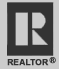
<style>
.page{position:relative;width:59px;height:69px;background:#cccccc}
.page>*{position:absolute;margin:0}
.t1{font:8.3px "Arial-BoldMT";color:#333333;font-weight:bold}
</style>
<div class="page">
<p class="t1" style="left:7px;top:59px;width:42px;height:7px">REALTOR</p>
<p class="t1" style="left:49px;top:57px;width:7px;height:7px">®</p>
</div>
